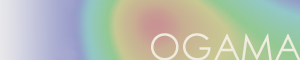
<style>
.page{position:relative;width:300px;height:60px}
.page>*{position:absolute;margin:0}
.t1{font:36.5px "CenturyGothic";color:#efebde}
</style>
<div class="page">
<p class="t1" style="left:151px;top:33px;width:150px;height:28px">OGAMA</p>
</div>
